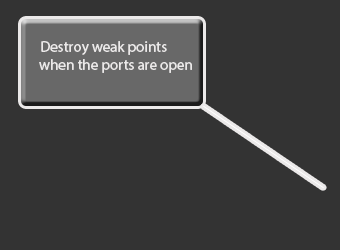
<style>
.page{position:relative;width:340px;height:250px;background:#333333}
.page>*{position:absolute;margin:0}
.t1{font:15px "MyriadHebrew-Regular";color:#ebe9e9}
</style>
<div class="page">
<p class="t1" style="left:39px;top:41px;width:153px;height:32px;text-align:right">Destroy weak points when the ports are open</p>
</div>
